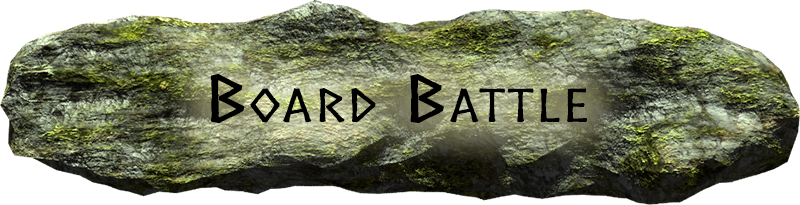
<style>
.page{position:relative;width:800px;height:205px}
.page>*{position:absolute;margin:0}
.t1{font:61.2px "Norse";color:#000000;font-variant:small-caps;font-weight:bold;scale:1.76 1}
</style>
<div class="page">
<p class="t1" style="left:210px;top:74px;width:378px;height:50px">Board Battle</p>
</div>
